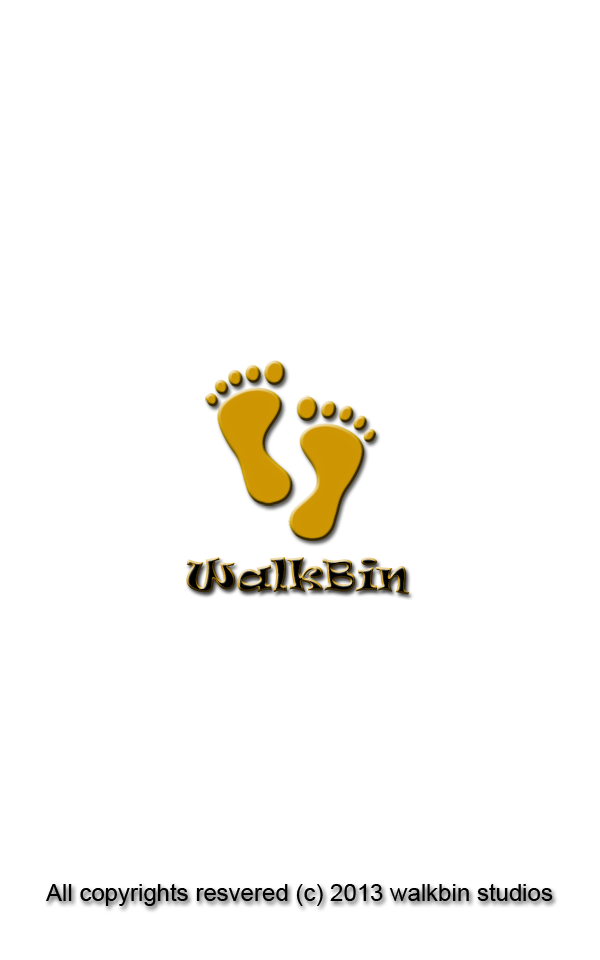
<style>
.page{position:relative;width:600px;height:960px;background:#ffffff}
.page>*{position:absolute;margin:0}
.t1{font:24px "ArialMT";color:#000000}
</style>
<div class="page">
<p class="t1" style="left:46px;top:883px;width:507px;height:23px">All copyrights resvered (c) 2013 walkbin studios</p>
</div>
